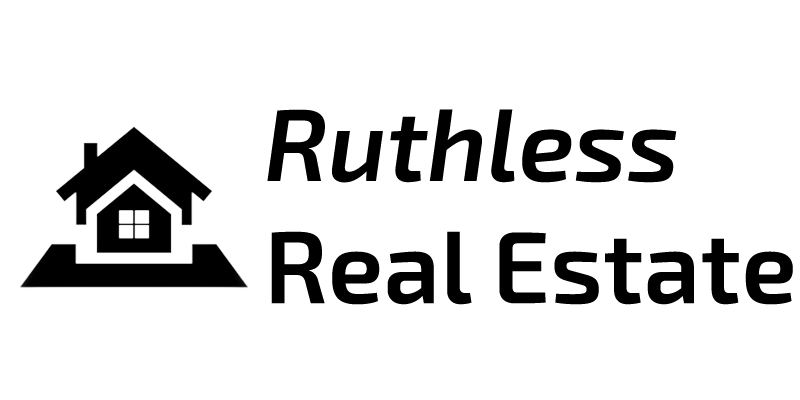
<style>
.page{position:relative;width:800px;height:400px;background:#ffffff}
.page>*{position:absolute;margin:0}
.t1{font:101.7px "Exo2-SemiBold";color:#000000}
.t2{font:101.7px "Exo2-SemiBoldItalic";color:#000000}
</style>
<div class="page">
<p class="t1" style="left:267px;top:109px;width:526px;height:196px"><span class="t2">Ruthless<br></span>Real Estate</p>
</div>
